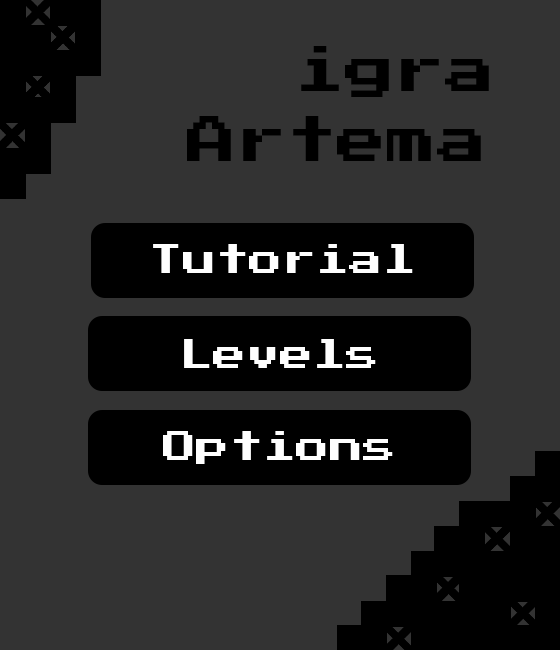
<style>
.page{position:relative;width:560px;height:650px;background:#333333}
.page>*{position:absolute;margin:0}
.t1{font:50px "PressStart2P-Regular";color:#000000}
.t2{font:33.3px "PressStart2P-Regular";color:#fefefe}
</style>
<div class="page">
<p class="t1" style="left:301px;top:46px;width:188px;height:51px">igra</p>
<p class="t1" style="left:187px;top:116px;width:294px;height:45px">Artema</p>
<p class="t2" style="left:153px;top:244px;width:260px;height:29px">Tutorial</p>
<p class="t2" style="left:184px;top:339px;width:192px;height:29px">Levels</p>
<p class="t2" style="left:163px;top:431px;width:230px;height:33px">Options</p>
</div>
